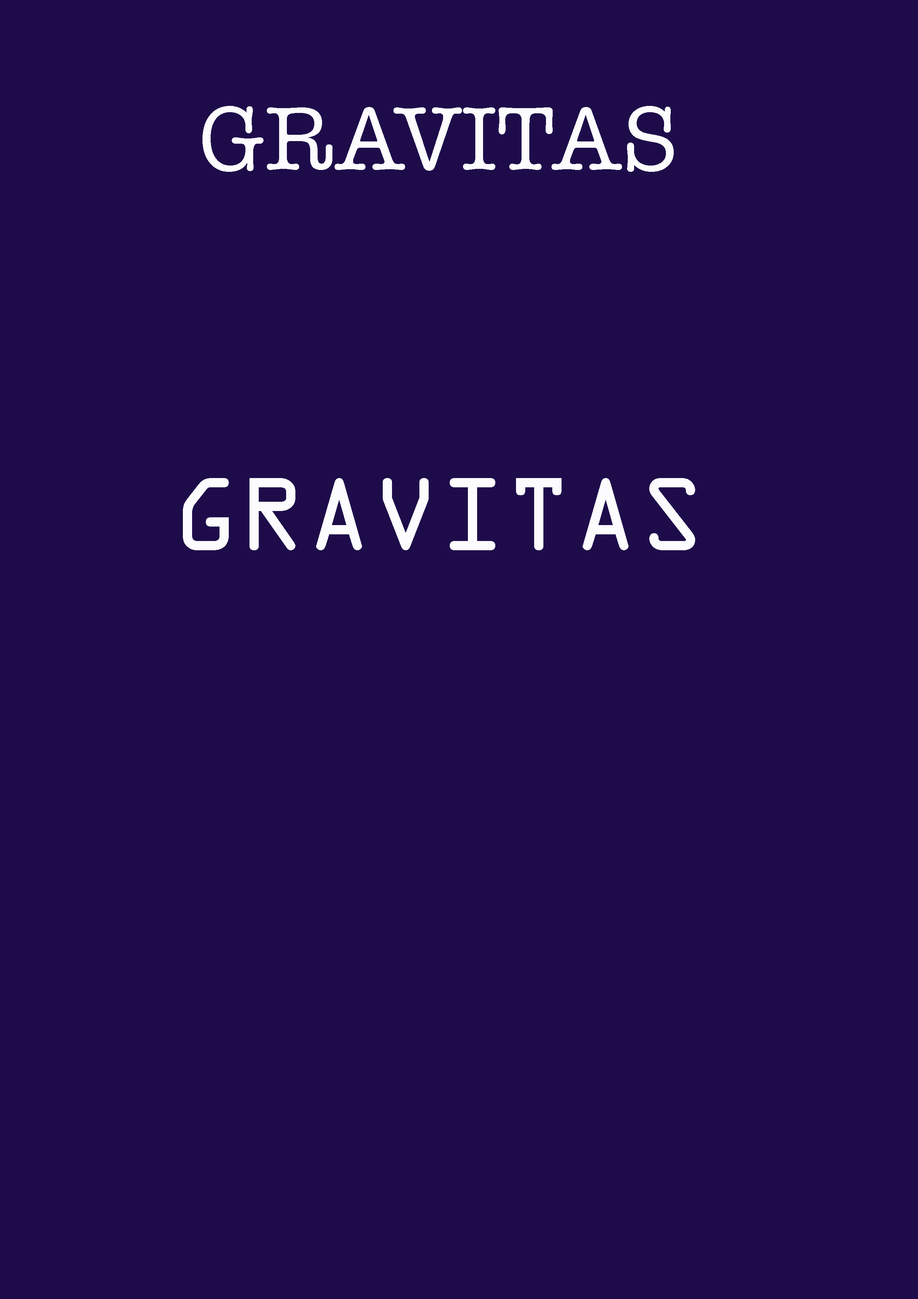
<style>
.page{position:relative;width:918px;height:1299px;background:#1e0c4a}
.page>*{position:absolute;margin:0}
.t1{font:92.6px "AmericanTypewriter";color:#fcfbfd}
.t2{font:92.6px "OCRAStd";color:#fcfbfd}
</style>
<div class="page">
<p class="t1" style="left:203px;top:106px;width:471px;height:66px">GRAVITAS</p>
<p class="t2" style="left:183px;top:478px;width:512px;height:72px">GRAVITAS</p>
</div>
